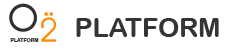
<style>
.page{position:relative;width:231px;height:51px;background:#ffffff}
.page>*{position:absolute;margin:0}
.t1{font:26.7px "ArialRoundedMTBold";color:#373435}
.t2{font:5.1px "ArialRoundedMTBold";color:#373435}
</style>
<div class="page">
<p class="t1" style="left:76px;top:18px;width:143px;height:19px">PLATFORM</p>
<p class="t2" style="left:10px;top:38px;width:29px;height:5px">PLATFORM</p>
</div>
